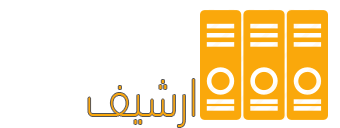
<style>
.page{position:relative;width:340px;height:128px;background:#ffffff}
.page>*{position:absolute;margin:0}
.t1{font:53.8px "DINNextLTArabic-UltraLight";color:#faa80b;scale:0.88 1}
</style>
<div class="page">
<p class="t1" style="left:88px;top:79px;width:107px;height:48px">ارشيف</p>
</div>
